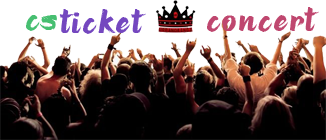
<style>
.page{position:relative;width:326px;height:140px;background:#ffffff}
.page>*{position:absolute;margin:0}
.t1{font:30px "EDMuzazhi";color:#47bf71}
.t2{font:30px "EDMuzazhi";color:#7447bf}
.t3{font:45px "EDMuzazhi";color:#47bfb5}
.t4{font:30px "EDMuzazhi";color:#bf476f}
</style>
<div class="page">
<p class="t1" style="left:26px;top:15px;width:31px;height:16px">CS</p>
<p class="t2" style="left:59px;top:9px;width:87px;height:25px"><span class="t3"> </span>TICKET</p>
<p class="t4" style="left:207px;top:7px;width:112px;height:25px">CONCERT</p>
</div>
